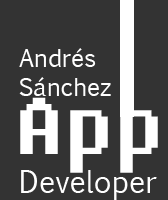
<style>
.page{position:relative;width:168px;height:200px;background:#333333}
.page>*{position:absolute;margin:0}
.t1{font:23.8px "EuphemiaCAS";color:#ffffff}
.t2{font:80px "Fixedsys";color:#ffffff}
.t3{font:30px "EuphemiaCAS";color:#fefefe}
</style>
<div class="page">
<p class="t1" style="left:19px;top:48px;width:92px;height:48px;text-align:right">Andrés Sánchez</p>
<p class="t2" style="left:20px;top:97px;width:138px;height:76px">App</p>
<p class="t3" style="left:21px;top:170px;width:136px;height:30px">Developer</p>
</div>
